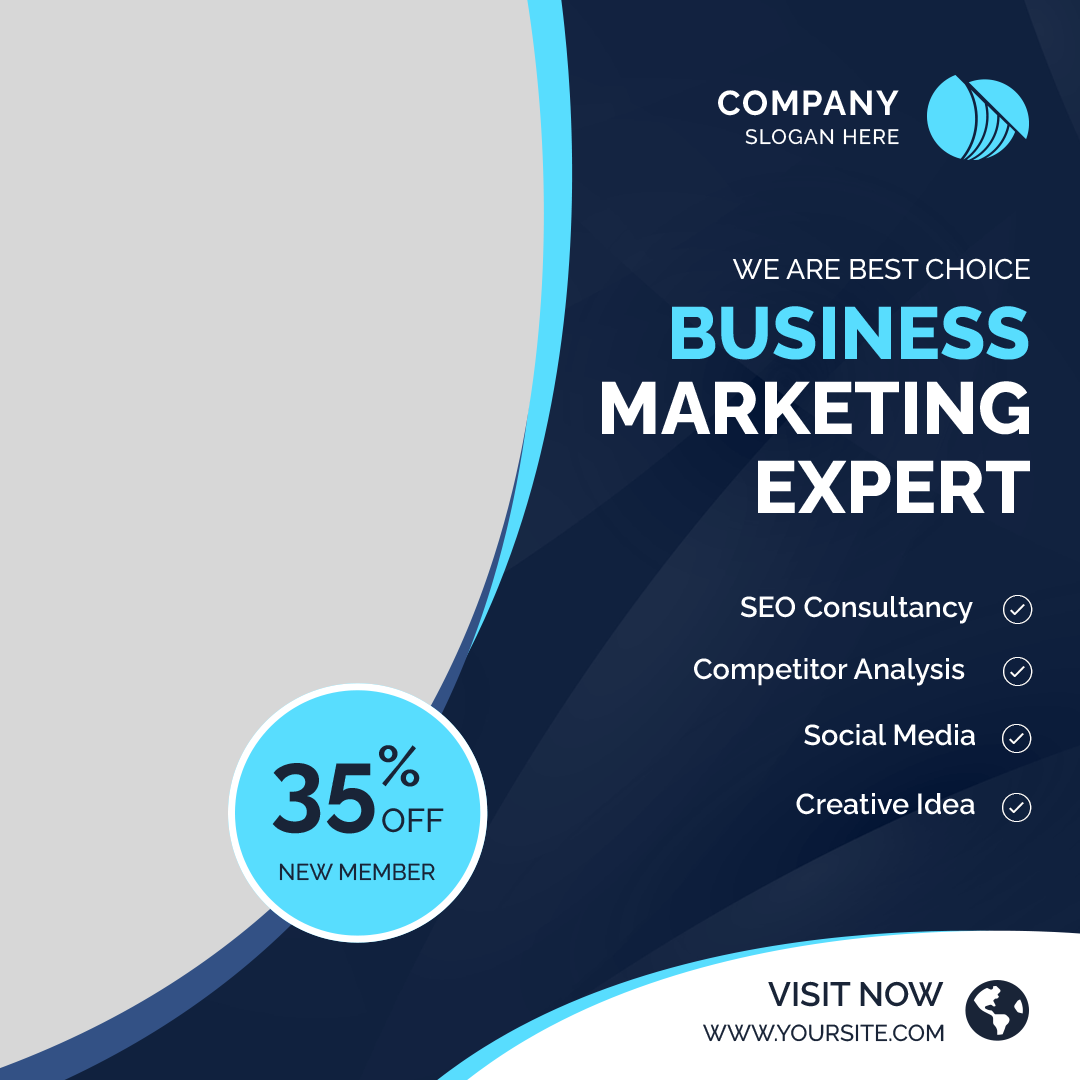
<style>
.page{position:relative;width:1080px;height:1080px;background:#d7d7d7}
.page>*{position:absolute;margin:0}
.t1{font:34.6px "Raleway-Bold";letter-spacing:0.05em;color:#ffffff}
.t2{font:20.7px "Raleway-Medium";letter-spacing:0.05em;color:#ffffff}
.t3{font:28.4px "Raleway-Medium";color:#ffffff}
.t4{font:73.8px "Raleway-ExtraBold";color:#58ddfe}
.t5{font:73.8px "Raleway-ExtraBold";color:#ffffff}
.t6{font:28.8px "Raleway-SemiBold";color:#ffffff}
.t7{font:97.2px "Raleway-Bold";color:#192437}
.t8{font:33.3px "Raleway-Medium";color:#192437}
.t9{font:22.9px "Raleway-Medium";color:#192437}
.t10{font:33.7px "Raleway-SemiBold";color:#192437}
</style>
<div class="page">
<p class="t1" style="left:718px;top:90px;width:181px;height:26px">COMPANY</p>
<p class="t2" style="left:745px;top:129px;width:154px;height:16px">SLOGAN HERE</p>
<p class="t3" style="left:732px;top:258px;width:298px;height:22px">WE ARE BEST CHOICE</p>
<p class="t4" style="left:672px;top:306px;width:357px;height:54px">BUSINESS</p>
<p class="t5" style="left:602px;top:381px;width:427px;height:54px">MARKETING</p>
<p class="t5" style="left:758px;top:460px;width:272px;height:53px">EXPERT</p>
<p class="t6" style="left:740px;top:596px;width:233px;height:28px">SEO Consultancy</p>
<p class="t6" style="left:694px;top:658px;width:271px;height:28px">Competitor Analysis</p>
<p class="t6" style="left:804px;top:724px;width:171px;height:22px">Social Media</p>
<p class="t7" style="left:272px;top:745px;width:148px;height:89px">35%</p>
<p class="t6" style="left:796px;top:793px;width:179px;height:22px">Creative Idea</p>
<p class="t8" style="left:382px;top:808px;width:62px;height:25px">OFF</p>
<p class="t9" style="left:279px;top:863px;width:156px;height:18px">NEW MEMBER</p>
<p class="t10" style="left:768px;top:981px;width:176px;height:26px">VISIT NOW</p>
<p class="t9" style="left:703px;top:1024px;width:241px;height:18px">WWW.YOURSITE.COM</p>
</div>
